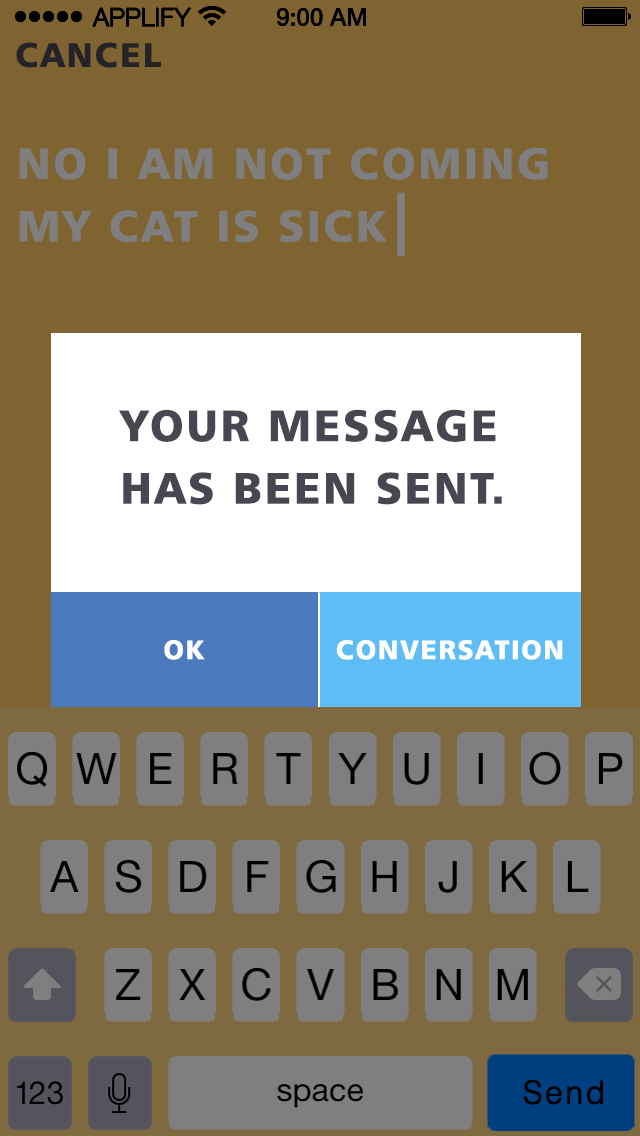
<style>
.page{position:relative;width:640px;height:1136px;background:#7f6432}
.page>*{position:absolute;margin:0}
.t1{font:25px "HelveticaNeueLTCom-Lt";letter-spacing:-0.02em;color:#000000;font-weight:bold}
.t2{font:58.3px "Humanist777BT-BlackB";letter-spacing:0.06em;color:#232328}
.t3{font:75px/62.5px "Humanist777BT-BlackB";letter-spacing:0.06em;color:#7f7f7f}
.t4{font:108.3px "Humanist777BT-BlackB";letter-spacing:0.06em;color:#7f7f7f}
.t5{font:75px/62.5px "Humanist777BT-BlackB";letter-spacing:0.06em;color:#464751}
.t6{font:45.8px "Humanist777BT-BlackB";letter-spacing:0.06em;color:#ffffff}
.t7{font:54.2px "HelveticaLTStd-Light";letter-spacing:0.06em;color:#000000;font-weight:bold}
</style>
<div class="page">
<p class="t1" style="left:92px;top:7px;width:99px;height:20px">APPLIFY</p>
<p class="t1" style="left:92px;top:7px;width:99px;height:20px">APPLIFY</p>
<p class="t2" style="left:16px;top:42px;width:145px;height:26px">CANCEL</p>
<p class="t3" style="left:19px;top:147px;width:529px;height:96px;text-align:right">NO I AM NOT COMING <br>MY CAT IS SICK</p>
<p class="t4" style="left:397px;top:192px;width:8px;height:64px">|</p>
<p class="t5" style="left:119px;top:409px;width:383px;height:96px;text-align:right">YOUR MESSAGE <br>HAS BEEN SENT.</p>
<p class="t6" style="left:164px;top:640px;width:41px;height:20px">OK</p>
<p class="t6" style="left:336px;top:640px;width:227px;height:20px">CONVERSATION</p>
<p class="t7" style="left:523px;top:1079px;width:80px;height:26px">Send</p>
</div>
